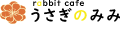
<style>
.page{position:relative;width:120px;height:40px;background:#ffffff}
.page>*{position:absolute;margin:0}
.t1{font:8.2px "UDDigiKyokashoNK-B";letter-spacing:0.08em;color:#000000}
.t2{font:8.2px "UDDigiKyokashoNK-B";letter-spacing:0.08em;color:#f7ea1a}
.t3{font:15.5px "UDDigiKyokashoNK-B";letter-spacing:0.08em;color:#000000}
.t4{font:15.5px "UDDigiKyokashoNK-B";letter-spacing:0.08em;color:#f7ea1a}
</style>
<div class="page">
<p class="t1" style="left:33px;top:0px;width:51px;height:6px">r<span class="t2">a</span>bbit cafe</p>
<p class="t3" style="left:31px;top:8px;width:90px;height:14px">うさぎ<span class="t4">の</span>みみ</p>
</div>
